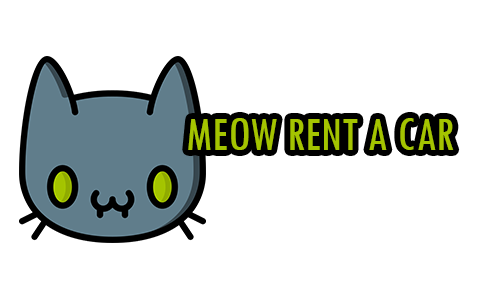
<style>
.page{position:relative;width:500px;height:300px;background:#ffffff}
.page>*{position:absolute;margin:0}
.t1{font:50px "TwCenMT-Condensed";color:#a4c400;text-transform:uppercase}
</style>
<div class="page">
<p class="t1" style="left:188px;top:118px;width:266px;height:32px">Meow Rent a cAR</p>
</div>
